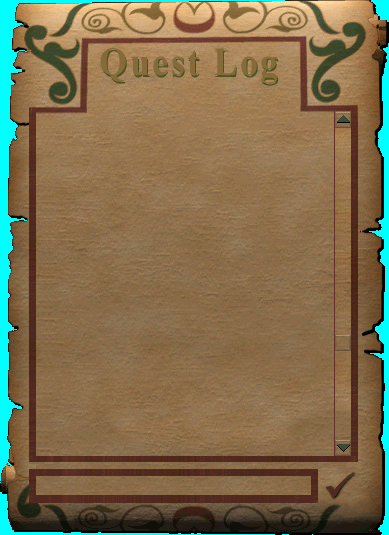
<style>
.page{position:relative;width:389px;height:535px}
.page>*{position:absolute;margin:0}
.t1{font:40px "TimesNewRomanPS-BoldMT";letter-spacing:0.07em;color:#846b39;scale:0.9 1}
</style>
<div class="page">
<p class="t1" style="left:100px;top:48px;width:178px;height:36px">Quest Log</p>
</div>
